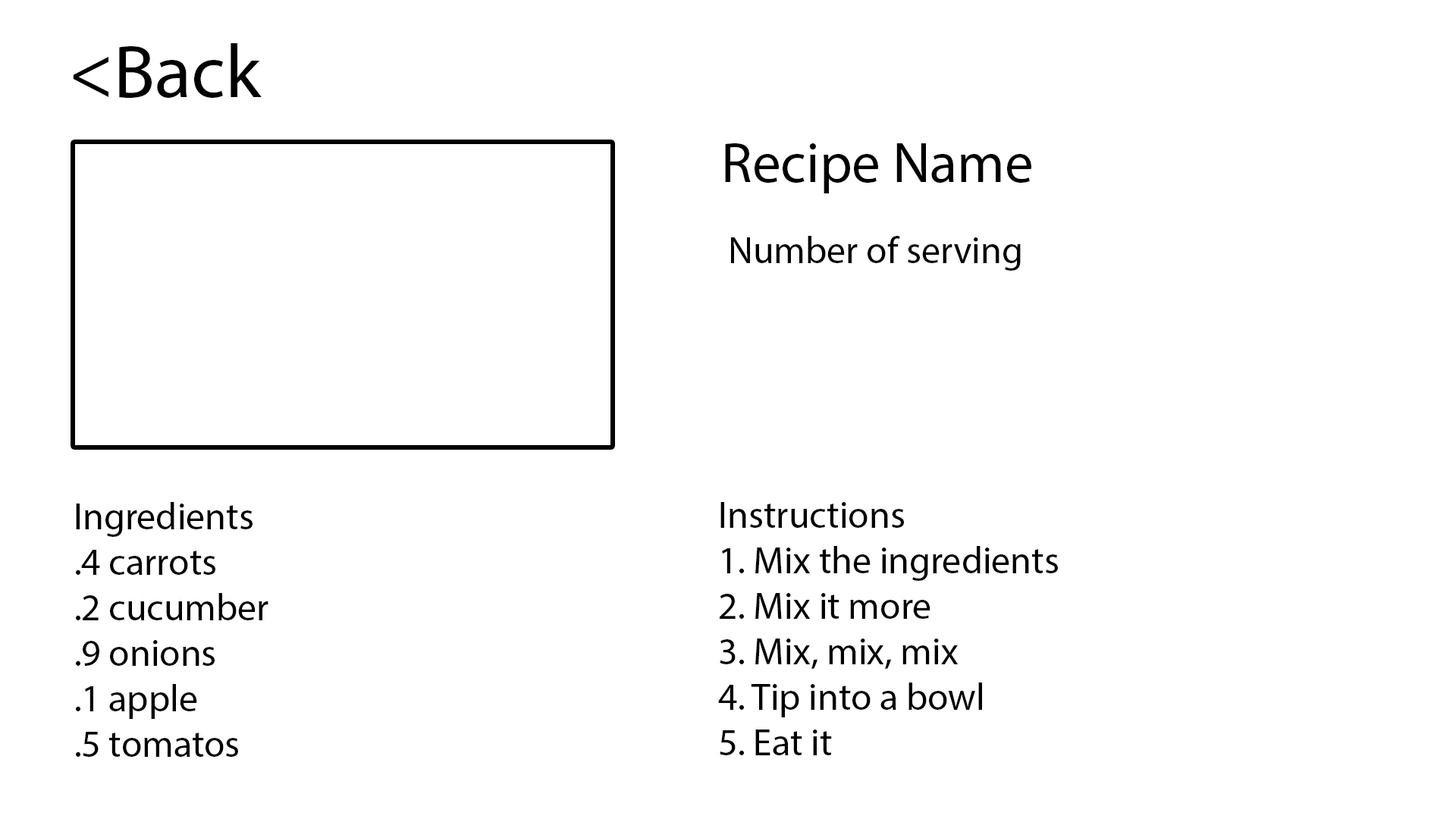
<style>
.page{position:relative;width:1456px;height:819px;background:#ffffff}
.page>*{position:absolute;margin:0}
.t1{font:75.8px "MyriadPro-Regular";color:#000000}
.t2{font:56.9px "MyriadPro-Regular";color:#000000}
.t3{font:37.9px "MyriadPro-Regular";color:#000000}
</style>
<div class="page">
<p class="t1" style="left:73px;top:43px;width:189px;height:55px">&lt;Back</p>
<p class="t2" style="left:725px;top:143px;width:306px;height:50px">Recipe Name</p>
<p class="t3" style="left:731px;top:236px;width:290px;height:35px">Number of serving</p>
<p class="t3" style="left:76px;top:502px;width:192px;height:255px">Ingredients<br>.4 carrots<br>.2 cucumber<br>.9 onions<br>.1 apple<br>.5 tomatos</p>
<p class="t3" style="left:718px;top:502px;width:340px;height:253px">Instructions<br>1. Mix the ingredients<br>2. Mix it more<br>3. Mix, mix, mix<br>4. Tip into a bowl<br>5. Eat it</p>
</div>
